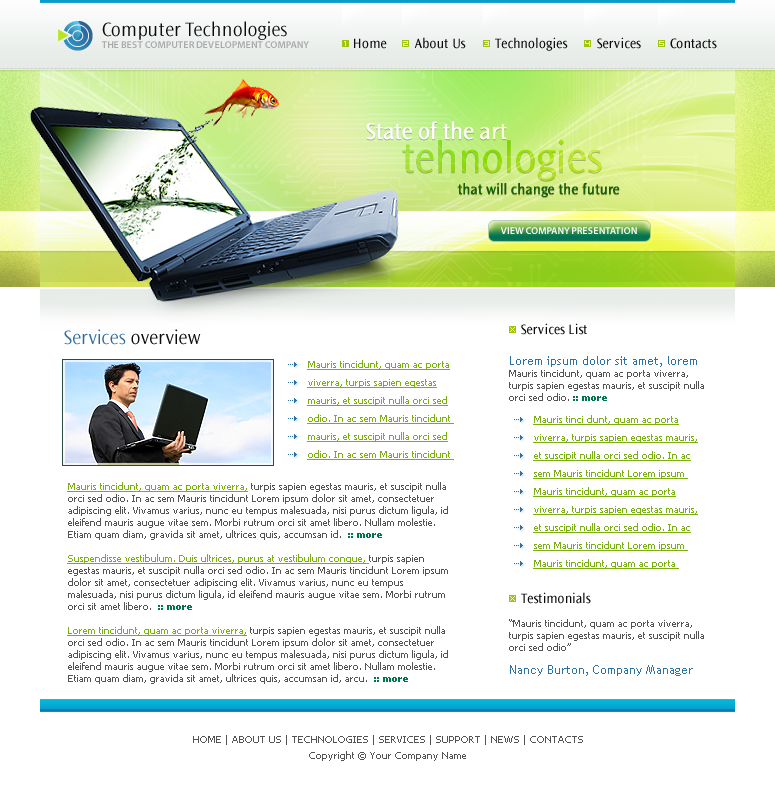
<style>
.page{position:relative;width:775px;height:790px;background:#ffffff}
.page>*{position:absolute;margin:0}
.t1{font:20px "OceanSansStd-Light";color:#0a0b0d}
.t2{font:10px "MyriadPro-Semibold";color:#a8aba9}
.t3{font:9px "BitLow";color:#ecf3cf}
.t4{font:14px "OceanSansStd-Book";color:#0a0b0d}
.t5{font:24px "OceanSansStd-Book";color:#ffffff}
.t6{font:44px "OceanSansStd-Light"}
.t7{font:15px "OceanSansStd-Book";color:#195f07}
.t8{font:10px "MyriadPro-Semibold";color:#ffffff}
.t9{font:20px "OceanSansStd-Light";color:#2c6b9f}
.t10{font:10px/18px "Tahoma";color:#7baf10;text-decoration:underline}
.t11{font:10px/12px "Tahoma";color:#535353}
.t12{font:12px/12px "TrebuchetMS";color:#2d72a5}
.t13{font:10px/12px "Tahoma-Bold";color:#017351}
.t14{font:10px/12px "Tahoma";color:#7baf10;text-decoration:underline}
.t15{font:12px "TrebuchetMS";color:#2d72a5}
.t16{font:10px/16px "Tahoma";color:#535353}
</style>
<div class="page">
<p class="t1" style="left:102px;top:21px;width:185px;height:19px">Computer Technologies</p>
<p class="t2" style="left:101px;top:41px;width:208px;height:7px">THE BEST COMPUTER DEVELOPMENT COMPANY</p>
<p class="t3" style="left:344px;top:41px;width:2px;height:5px">1</p>
<p class="t4" style="left:354px;top:38px;width:33px;height:11px">Home</p>
<p class="t3" style="left:403px;top:41px;width:5px;height:5px">2</p>
<p class="t4" style="left:414px;top:37px;width:52px;height:12px">About Us</p>
<p class="t3" style="left:484px;top:41px;width:5px;height:5px">3</p>
<p class="t4" style="left:495px;top:37px;width:73px;height:14px">Technologies</p>
<p class="t3" style="left:585px;top:41px;width:5px;height:5px">4</p>
<p class="t4" style="left:597px;top:37px;width:44px;height:12px">Services</p>
<p class="t3" style="left:659px;top:41px;width:5px;height:5px">5</p>
<p class="t4" style="left:670px;top:38px;width:47px;height:11px">Contacts</p>
<p class="t5" style="left:366px;top:121px;width:141px;height:19px">State of the art</p>
<p class="t6" style="left:402px;top:139px;width:200px;height:42px">tehnologies</p>
<p class="t7" style="left:457px;top:182px;width:163px;height:15px">that will change the future</p>
<p class="t8" style="left:500px;top:227px;width:137px;height:7px">VIEW COMPANY PRESENTATION</p>
<p class="t9" style="left:64px;top:329px;width:137px;height:16px">Services <span class="t1">overview</span></p>
<p class="t3" style="left:510px;top:327px;width:5px;height:5px">X</p>
<p class="t4" style="left:521px;top:323px;width:66px;height:12px">Services List</p>
<p class="t10" style="left:307px;top:360px;width:147px;height:100px">Mauris tincidunt, quam ac porta viverra, turpis sapien egestas mauris, et suscipit nulla orci sed odio. In ac sem Mauris tincidunt <br>mauris, et suscipit nulla orci sed odio. In ac sem Mauris tincidunt</p>
<p class="t11" style="left:509px;top:356px;width:195px;height:45px"><span class="t12">Lorem ipsum dolor sit amet, lorem <br></span>Mauris tincidunt, quam ac porta viverra, turpis sapien egestas mauris, et suscipit nulla orci sed odio.<span class="t13"> :: more</span></p>
<p class="t10" style="left:533px;top:415px;width:165px;height:154px">Mauris tinci dunt, quam ac porta viverra, turpis sapien egestas mauris, et suscipit nulla orci sed odio. In ac sem Mauris tincidunt Lorem ipsum <br>Mauris tincidunt, quam ac porta viverra, turpis sapien egestas mauris, et suscipit nulla orci sed odio. In ac sem Mauris tincidunt Lorem ipsum <br>Mauris tincidunt, quam ac porta</p>
<p class="t11" style="left:67px;top:482px;width:381px;height:202px"><span class="t14">Mauris tincidunt, quam ac porta viverra,</span> turpis sapien egestas mauris, et suscipit nulla orci sed odio. In ac sem Mauris tincidunt Lorem ipsum dolor sit amet, consectetuer adipiscing elit. Vivamus varius, nunc eu tempus malesuada, nisi purus dictum ligula, id eleifend mauris augue vitae sem. Morbi rutrum orci sit amet libero. Nullam molestie. Etiam quam diam, gravida sit amet, ultrices quis, accumsan id. <span class="t13"> :: more<br><br></span><span class="t14">Suspendisse vestibulum. Duis ultrices, purus at vestibulum congue, </span>turpis sapien egestas mauris, et suscipit nulla orci sed odio. In ac sem Mauris tincidunt Lorem ipsum dolor sit amet, consectetuer adipiscing elit. Vivamus varius, nunc eu tempus malesuada, nisi purus dictum ligula, id eleifend mauris augue vitae sem. Morbi rutrum orci sit amet libero. <span class="t13"> :: more<br><br></span><span class="t14">Lorem tincidunt, quam ac porta viverra,</span> turpis sapien egestas mauris, et suscipit nulla orci sed odio. In ac sem Mauris tincidunt Lorem ipsum dolor sit amet, consectetuer adipiscing elit. Vivamus varius, nunc eu tempus malesuada, nisi purus dictum ligula, id eleifend mauris augue vitae sem. Morbi rutrum orci sit amet libero. Nullam molestie. Etiam quam diam, gravida sit amet, ultrices quis, accumsan id, arcu. <span class="t13"> :: more</span></p>
<p class="t4" style="left:521px;top:592px;width:70px;height:12px">Testimonials</p>
<p class="t3" style="left:510px;top:596px;width:5px;height:5px">X</p>
<p class="t11" style="left:509px;top:619px;width:195px;height:32px">“Mauris tincidunt, quam ac porta viverra, turpis sapien egestas mauris, et suscipit nulla orci sed odio”</p>
<p class="t15" style="left:510px;top:665px;width:183px;height:11px">Nancy Burton, Company Manager</p>
<p class="t16" style="left:193px;top:735px;width:390px;height:26px;text-align:center">HOME | ABOUT US | TECHNOLOGIES | SERVICES | SUPPORT | NEWS | CONTACTS<br>Copyright © Your Company Name</p>
</div>
